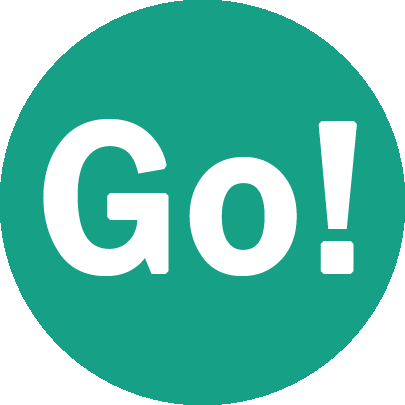
<style>
.page{position:relative;width:405px;height:405px;background:#16a085}
.page>*{position:absolute;margin:0}
.t1{font:220px "FranklinGothic-Medium";color:#ffffff;font-weight:bold}
</style>
<div class="page">
<p class="t1" style="left:43px;top:119px;width:314px;height:157px">Go!</p>
</div>
